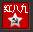
<style>
.page{position:relative;width:33px;height:32px;background:#c50000}
.page>*{position:absolute;margin:0}
.t1{font:10.4px "SimSun";letter-spacing:-0.25em;color:#ffffff}
</style>
<div class="page">
<p class="t1" style="left:4px;top:4px;width:24px;height:9px">红八九</p>
</div>
